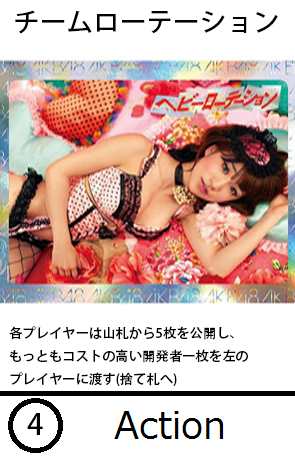
<style>
.page{position:relative;width:295px;height:460px;background:#ffffff}
.page>*{position:absolute;margin:0}
.t1{font:26.7px "AdobeHeitiStd-Regular";color:#000000}
.t2{font:13.3px "AdobeHeitiStd-Regular";color:#000000}
.t3{font:29.3px "AdobeHeitiStd-Regular";color:#000000}
</style>
<div class="page">
<p class="t1" style="left:15px;top:10px;width:263px;height:24px">チームローテーション</p>
<p class="t2" style="left:9px;top:326px;width:239px;height:60px">各プレイヤーは山札から5枚を公開し、<br>もっともコストの高い開発者一枚を左の<br>プレイヤーに渡す(捨て札へ)</p>
<p class="t3" style="left:27px;top:413px;width:16px;height:22px">4</p>
</div>
